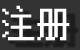
<style>
.page{position:relative;width:80px;height:50px;background:#333333}
.page>*{position:absolute;margin:0}
.t1{font:34px "FZXS12--GB1-0";letter-spacing:0.005em;color:#fffdfd;font-weight:bold}
</style>
<div class="page">
<p class="t1" style="left:2px;top:5px;width:68px;height:36px">注册</p>
</div>
